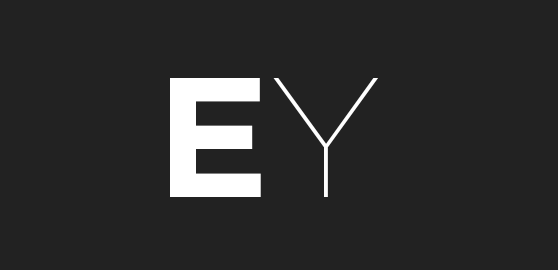
<style>
.page{position:relative;width:558px;height:270px;background:#222222}
.page>*{position:absolute;margin:0}
.t1{font:170px "Gotham-Bold";color:#ffffff}
.t2{font:170px "GothamThin";color:#ffffff}
</style>
<div class="page">
<p class="t1" style="left:170px;top:78px;width:208px;height:119px">E<span class="t2">Y</span></p>
</div>
